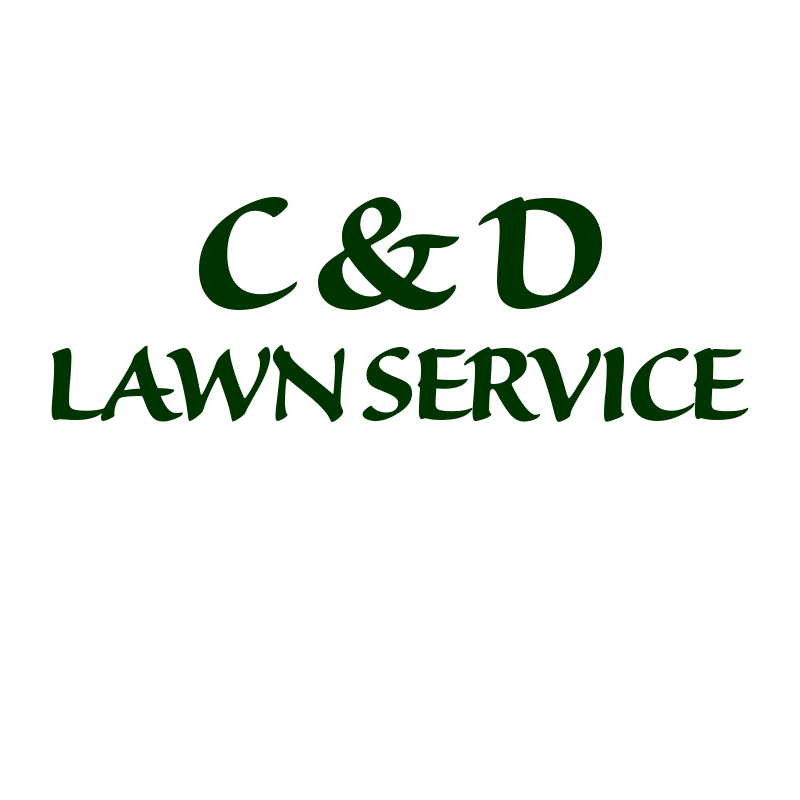
<style>
.page{position:relative;width:800px;height:800px;background:#ffffff}
.page>*{position:absolute;margin:0}
.t1{font:208px "SanvitoPro-Bold";letter-spacing:-0.06em;color:#003300}
.t2{font:136px "SanvitoPro-Bold";letter-spacing:-0.06em;color:#003300}
</style>
<div class="page">
<p class="t1" style="left:199px;top:197px;width:403px;height:114px">C &amp; D</p>
<p class="t2" style="left:51px;top:345px;width:698px;height:77px">LAWN SERVICE</p>
</div>
